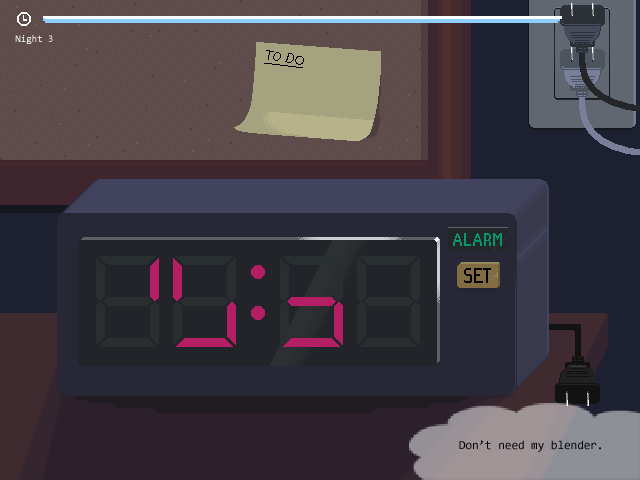
<style>
.page{position:relative;width:640px;height:480px}
.page>*{position:absolute;margin:0}
.t1{font:10px "Consolas";color:#ffffff}
.t2{font:12px "Consolas";color:#000000}
</style>
<div class="page">
<p class="t1" style="left:15px;top:35px;width:38px;height:9px">Night 3</p>
<p class="t2" style="left:459px;top:440px;width:142px;height:12px">Don’t need my blender.</p>
</div>
